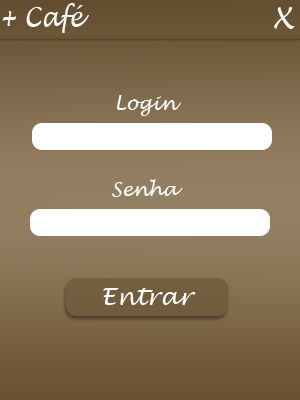
<style>
.page{position:relative;width:300px;height:400px}
.page>*{position:absolute;margin:0}
.t1{font:27.6px "LucidaHandwriting-Italic";color:#f9f9f9;scale:0.86 1}
.t2{font:30.1px "LucidaHandwriting-Italic";color:#f9f9f9}
.t3{font:19.2px "LucidaHandwriting-Italic";color:#f9f9f9}
.t4{font:24px "LucidaHandwriting-Italic";color:#fefdfb}
</style>
<div class="page">
<p class="t1" style="left:2px;top:3px;width:87px;height:30px">+ Café</p>
<p class="t2" style="left:274px;top:7px;width:21px;height:22px">X</p>
<p class="t3" style="left:116px;top:95px;width:65px;height:21px">Login</p>
<p class="t3" style="left:112px;top:179px;width:71px;height:18px">Senha</p>
<p class="t4" style="left:103px;top:288px;width:93px;height:17px">Entrar</p>
</div>
